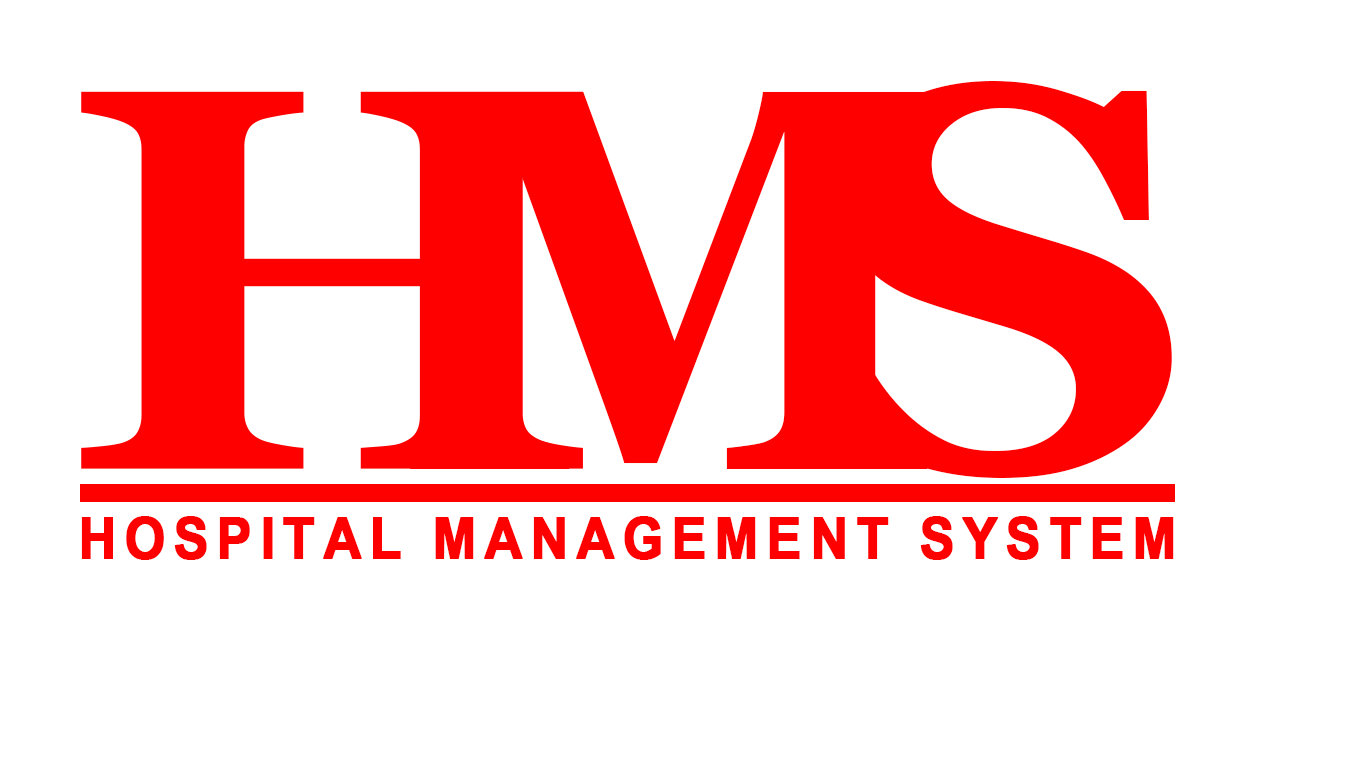
<style>
.page{position:relative;width:1366px;height:768px;background:#ffffff}
.page>*{position:absolute;margin:0}
.t1{font:543.8px "Georgia-Bold";color:#ff0000;text-transform:uppercase;scale:1.09 1}
.t2{font:543.8px "Georgia-Bold";color:#ff0000;text-transform:uppercase}
.t3{font:56.7px "Arial-BoldMT";letter-spacing:0.13em;color:#ff0000;text-transform:uppercase;font-weight:bold;scale:0.93 1}
</style>
<div class="page">
<p class="t1" style="left:827px;top:80px;width:345px;height:398px">S</p>
<p class="t2" style="left:410px;top:91px;width:518px;height:378px">M</p>
<p class="t3" style="left:81px;top:516px;width:1093px;height:44px">Hospital Management system</p>
</div>
